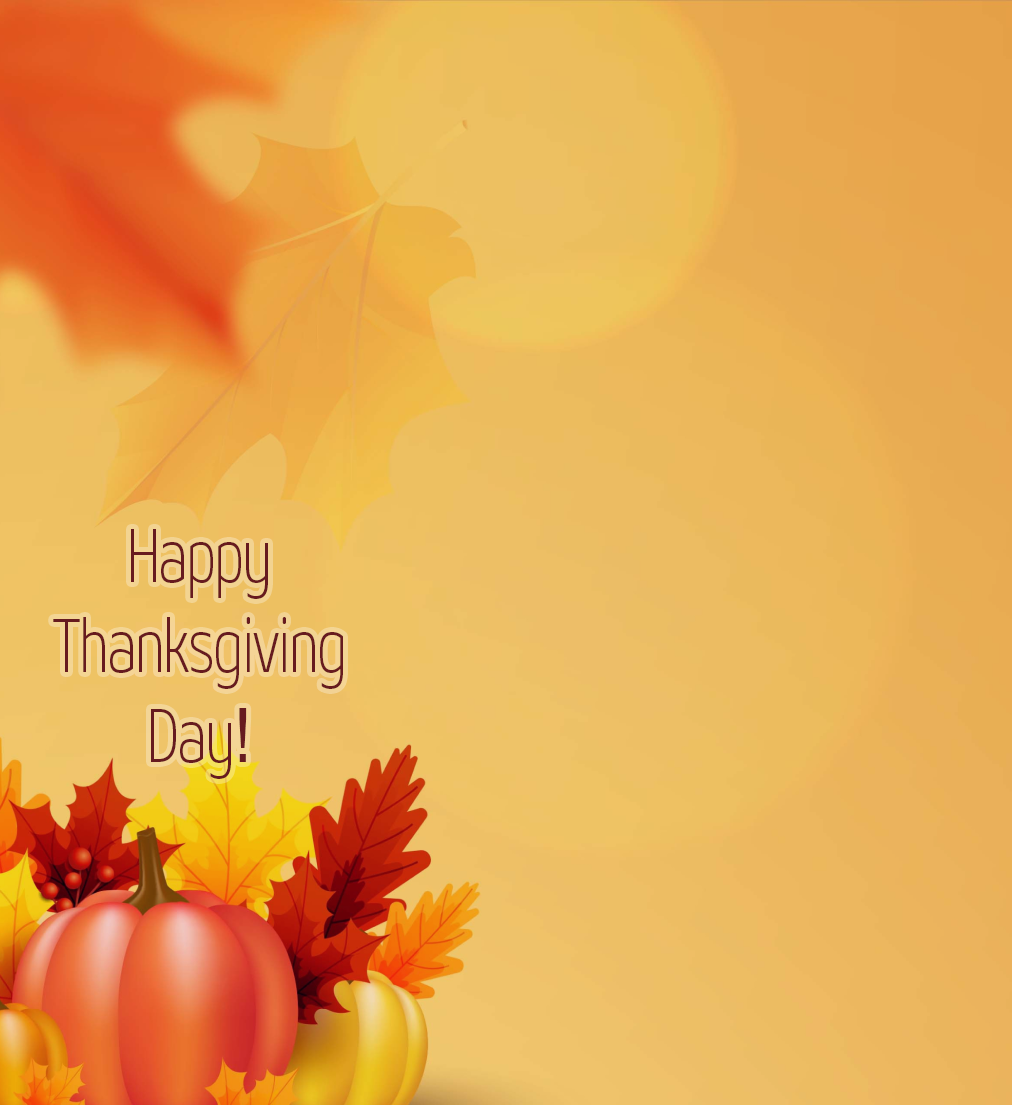
<style>
.page{position:relative;width:1012px;height:1105px}
.page>*{position:absolute;margin:0}
.t1{font:75px "FONTSPRINGDEMO-GeonCondensedExtraLightRegular";color:#671b1f}
.t2{font:75px "ArialNarrow";color:#671b1f}
</style>
<div class="page">
<p class="t1" style="left:53px;top:529px;width:290px;height:250px;text-align:center">Happy<br>Thanksgiving<br>Day<span class="t2">!</span></p>
</div>
